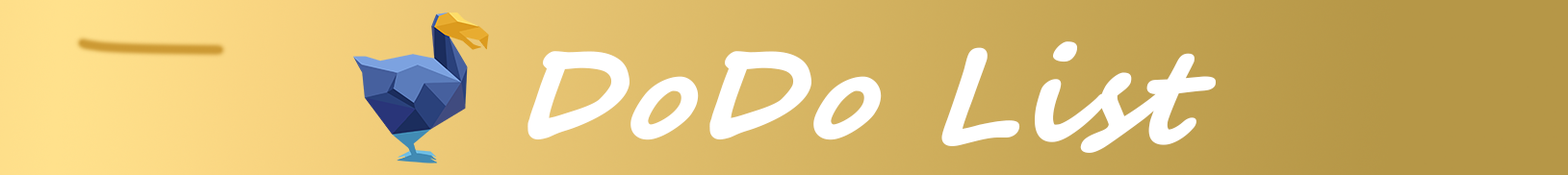
<style>
.page{position:relative;width:1568px;height:175px}
.page>*{position:absolute;margin:0}
.t1{font:126px "SegoeScript-Bold";color:#ffffff;font-weight:bold;font-style:italic}
</style>
<div class="page">
<p class="t1" style="left:527px;top:41px;width:690px;height:112px">DoDo List</p>
</div>
